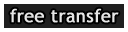
<style>
.page{position:relative;width:128px;height:32px;background:#1f1f1f}
.page>*{position:absolute;margin:0}
.t1{font:18px "TrebuchetMS";color:#e6e6e6;font-weight:bold}
</style>
<div class="page">
<p class="t1" style="left:10px;top:8px;width:109px;height:15px">free transfer</p>
</div>
